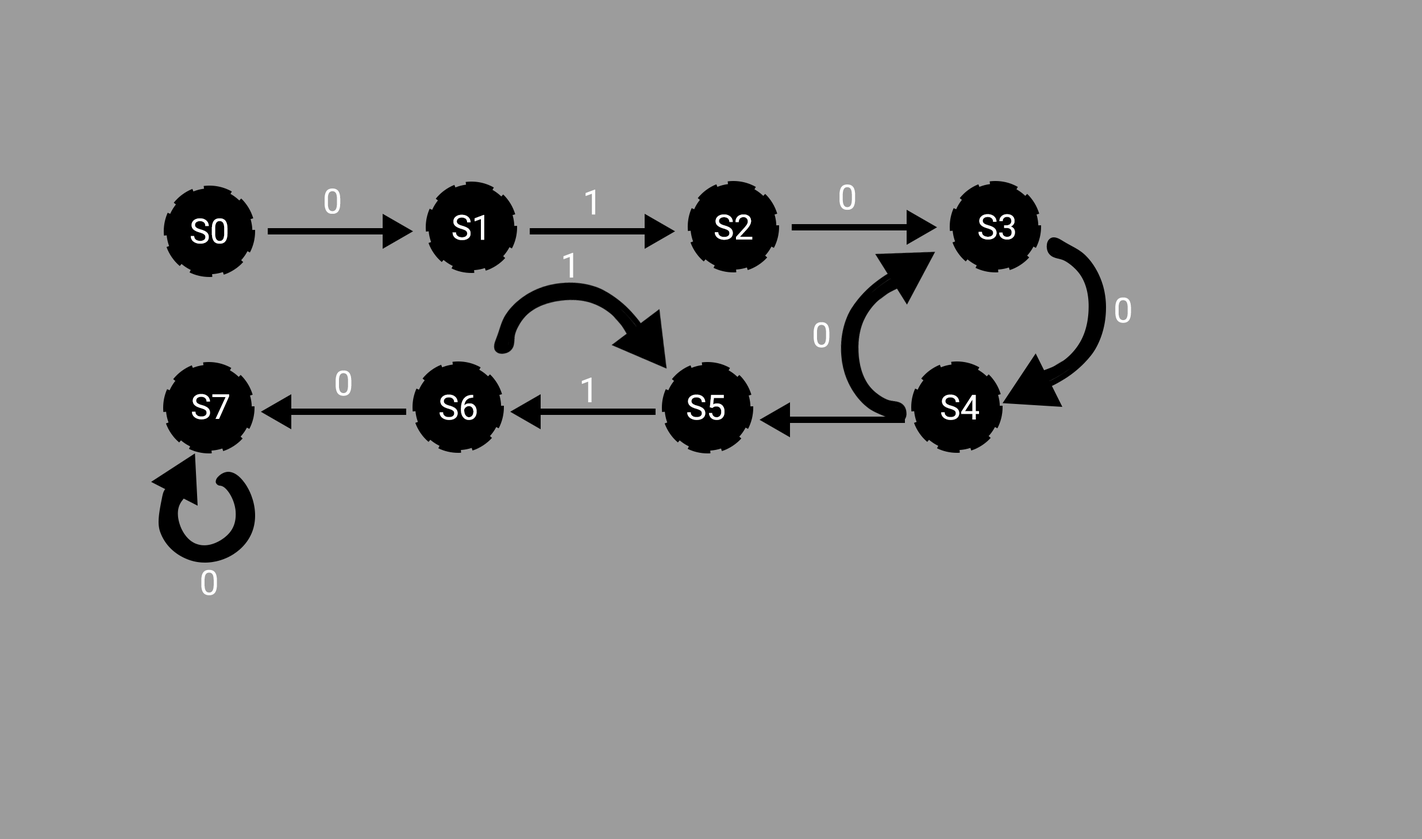
<style>
.page{position:relative;width:1422px;height:839px;background:#9c9c9c}
.page>*{position:absolute;margin:0}
.t1{font:34.5px "Roboto-Regular";color:#ffffff}
</style>
<div class="page">
<p class="t1" style="left:839px;top:184px;width:16px;height:26px">0</p>
<p class="t1" style="left:325px;top:188px;width:16px;height:26px">0</p>
<p class="t1" style="left:585px;top:190px;width:10px;height:25px">1</p>
<p class="t1" style="left:191px;top:218px;width:36px;height:26px">S0</p>
<p class="t1" style="left:452px;top:214px;width:32px;height:26px">S1</p>
<p class="t1" style="left:715px;top:214px;width:38px;height:26px">S2</p>
<p class="t1" style="left:978px;top:214px;width:37px;height:26px">S3</p>
<p class="t1" style="left:563px;top:253px;width:10px;height:24px">1</p>
<p class="t1" style="left:1115px;top:297px;width:16px;height:26px">0</p>
<p class="t1" style="left:813px;top:322px;width:17px;height:26px">0</p>
<p class="t1" style="left:335px;top:370px;width:17px;height:26px">0</p>
<p class="t1" style="left:581px;top:377px;width:11px;height:25px">1</p>
<p class="t1" style="left:192px;top:393px;width:37px;height:26px">S7</p>
<p class="t1" style="left:439px;top:394px;width:38px;height:26px">S6</p>
<p class="t1" style="left:687px;top:394px;width:37px;height:26px">S5</p>
<p class="t1" style="left:941px;top:394px;width:38px;height:26px">S4</p>
<p class="t1" style="left:201px;top:569px;width:16px;height:26px">0</p>
</div>
